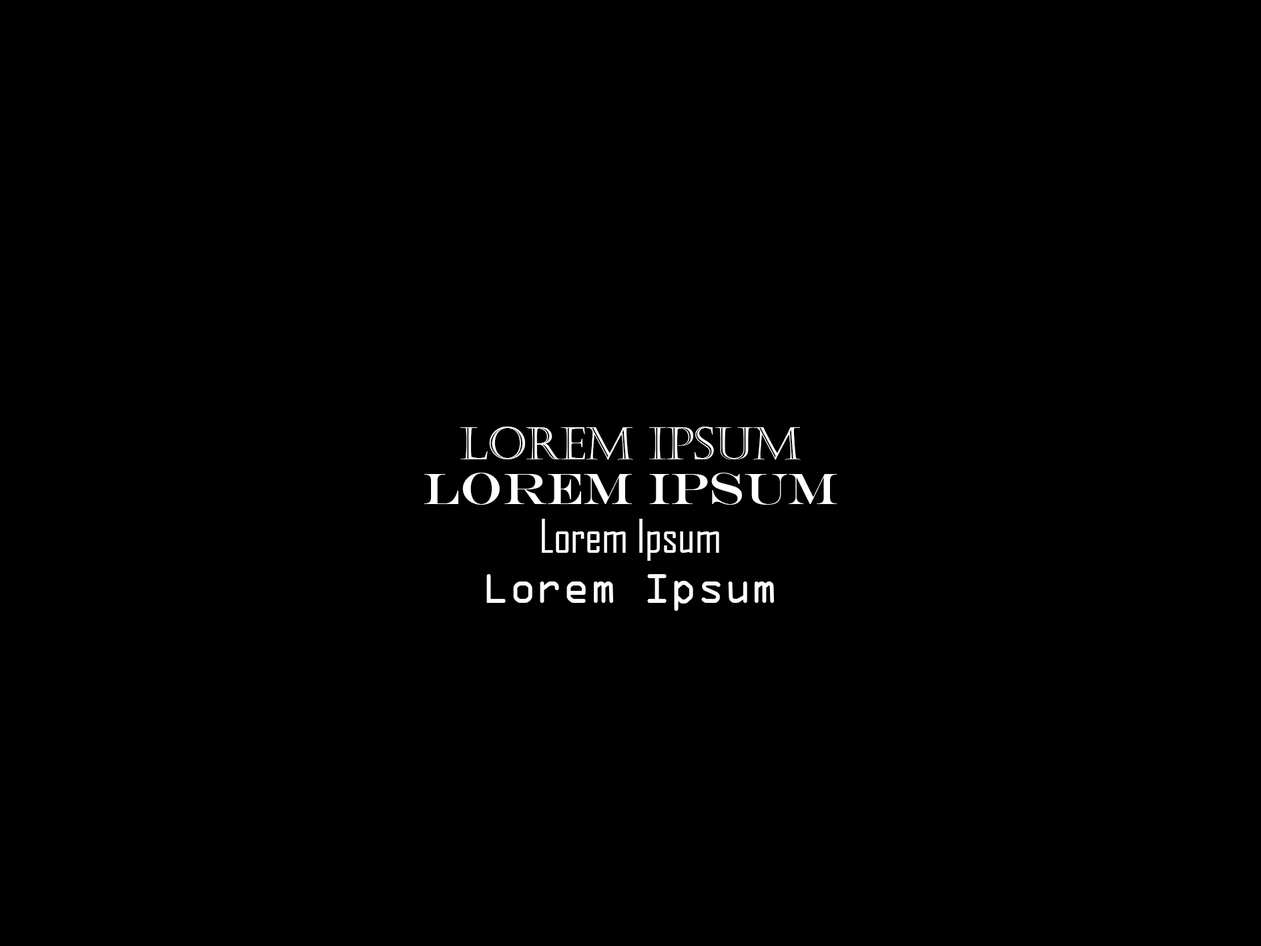
<style>
.page{position:relative;width:1261px;height:946px;background:#000000}
.page>*{position:absolute;margin:0}
.t1{font:44.5px "Castellar";color:#ffffff}
.t2{font:44.5px "EngraversMT";color:#ffffff}
.t3{font:44.5px "AgencyFB-Reg";color:#ffffff}
.t4{font:44.5px "OCRAExtended";color:#ffffff}
</style>
<div class="page">
<p class="t1" style="left:460px;top:426px;width:341px;height:34px">Lorem Ipsum</p>
<p class="t2" style="left:424px;top:472px;width:413px;height:32px">Lorem Ipsum</p>
<p class="t3" style="left:542px;top:518px;width:177px;height:43px">Lorem Ipsum</p>
<p class="t4" style="left:486px;top:574px;width:288px;height:37px">Lorem Ipsum</p>
</div>
